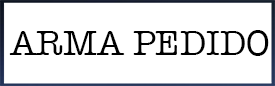
<style>
.page{position:relative;width:275px;height:86px;background:#ffffff}
.page>*{position:absolute;margin:0}
.t1{font:36px "AmericanTypewriter";color:#000000}
</style>
<div class="page">
<p class="t1" style="left:9px;top:30px;width:260px;height:26px">ARMA PEDIDO</p>
</div>
